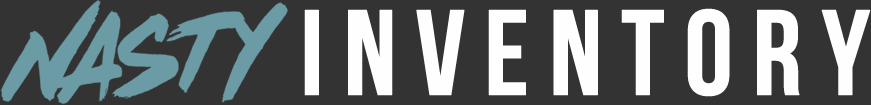
<style>
.page{position:relative;width:871px;height:105px;background:#333333}
.page>*{position:absolute;margin:0}
.t1{font:120.8px "BebasNeue";letter-spacing:0.14em;color:#fefefe;font-weight:bold}
</style>
<div class="page">
<p class="t1" style="left:304px;top:8px;width:567px;height:89px">INVENTORY</p>
</div>
